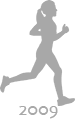
<style>
.page{position:relative;width:75px;height:121px;background:#ffffff}
.page>*{position:absolute;margin:0}
.t1{font:18px "Actor-Regular";color:#a8a8a8;text-transform:uppercase}
</style>
<div class="page">
<p class="t1" style="left:19px;top:106px;width:39px;height:13px">2009</p>
</div>
